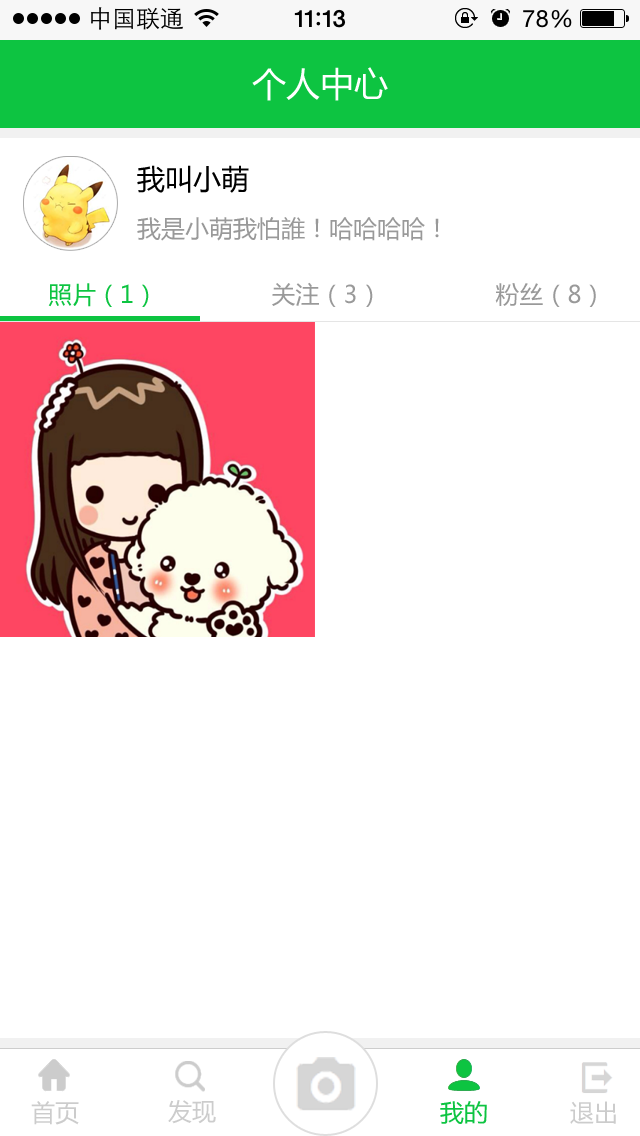
<style>
.page{position:relative;width:640px;height:1136px;background:#ffffff}
.page>*{position:absolute;margin:0}
.t1{font:34px "MicrosoftYaHei";color:#ffffff}
.t2{font:28px "MicrosoftYaHei";color:#000000}
.t3{font:24px "MicrosoftYaHei";color:#999999}
.t4{font:24px "MicrosoftYaHei";color:#0dc441}
.t5{font:24px "MicrosoftYaHei";color:#cccccc}
</style>
<div class="page">
<p class="t1" style="left:252px;top:67px;width:136px;height:34px">个人中心</p>
<p class="t2" style="left:137px;top:165px;width:112px;height:28px">我叫小萌</p>
<p class="t3" style="left:137px;top:217px;width:302px;height:24px">我是小萌我怕誰！哈哈哈哈！</p>
<p class="t3" style="left:48px;top:282px;width:548px;height:25px"><span class="t4">照片（1）                </span>关注（3）                粉丝（8）</p>
<p class="t5" style="left:31px;top:1101px;width:48px;height:24px">首页</p>
<p class="t5" style="left:168px;top:1100px;width:48px;height:24px">发现</p>
<p class="t4" style="left:440px;top:1101px;width:47px;height:23px">我的</p>
<p class="t5" style="left:570px;top:1101px;width:46px;height:23px">退出</p>
</div>
